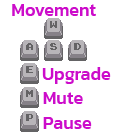
<style>
.page{position:relative;width:113px;height:140px;background:#ffffff}
.page>*{position:absolute;margin:0}
.t1{font:18px "Kanit-Medium";color:#cc0cca}
</style>
<div class="page">
<p class="t1" style="left:12px;top:4px;width:84px;height:12px">Movement</p>
<p class="t1" style="left:42px;top:67px;width:69px;height:17px">Upgrade</p>
<p class="t1" style="left:43px;top:92px;width:40px;height:12px">Mute</p>
<p class="t1" style="left:43px;top:117px;width:49px;height:12px">Pause</p>
</div>
